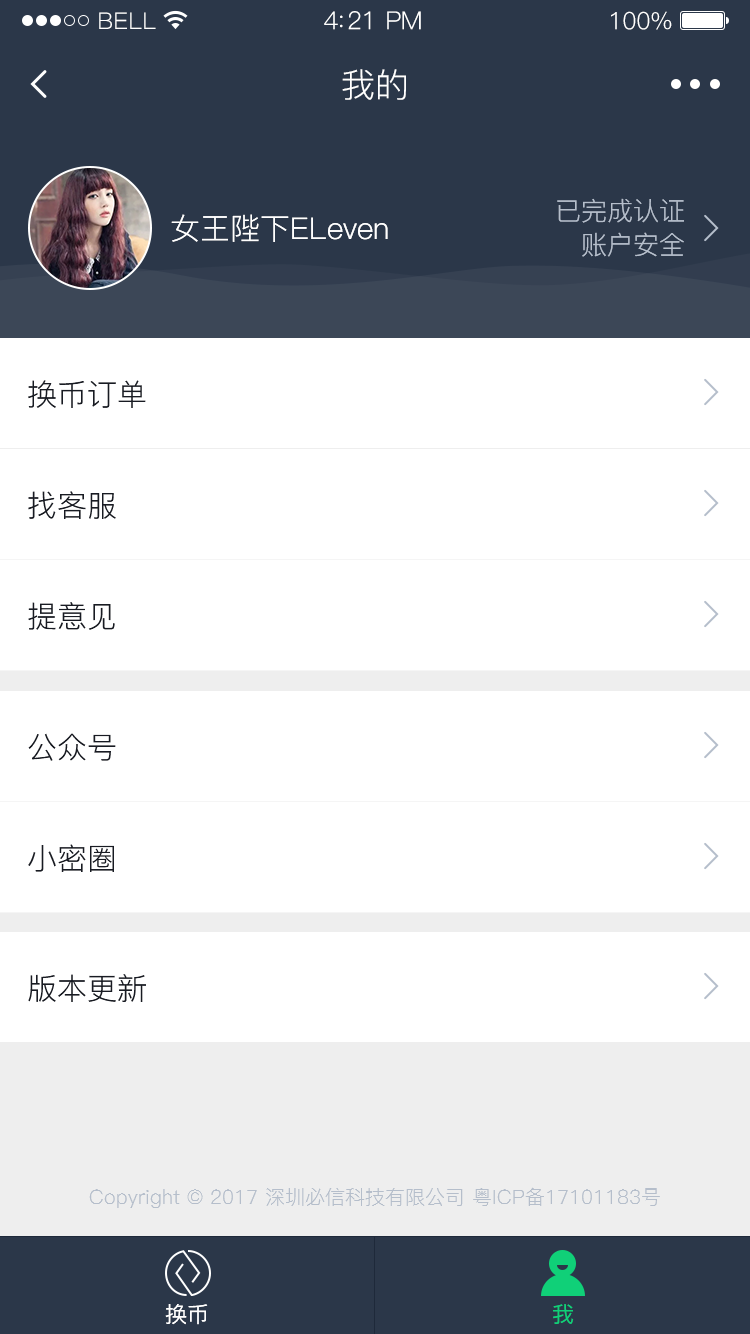
<style>
.page{position:relative;width:750px;height:1334px;background:#ffffff}
.page>*{position:absolute;margin:0}
.t1{font:23px "PingFang-SC-Regular";letter-spacing:0.02em;color:#ffffff}
.t2{font:25px "PingFang-SC-Regular";letter-spacing:-0.02em;color:#ffffff}
.t3{font:24px "PingFang-SC-Regular";letter-spacing:-0.02em;color:#ffffff}
.t4{font:34px "PingFang-SC-Regular";color:#ffffff}
.t5{font:26px/34px "PingFang-SC-Regular";color:#b5becb}
.t6{font:30px "PingFang-SC-Regular";color:#ffffff}
.t7{font:30px "PingFang-SC-Regular";color:#181b23}
.t8{font:20px "PingFang-SC-Regular";color:#b5becb}
.t9{font:22px "PingFang-SC-Medium";color:#ffffff}
.t10{font:22px "PingFang-SC-Medium";color:#10d078}
</style>
<div class="page">
<p class="t1" style="left:99px;top:12px;width:57px;height:17px">BELL</p>
<p class="t2" style="left:324px;top:11px;width:97px;height:19px">4:21 PM</p>
<p class="t3" style="left:611px;top:11px;width:61px;height:19px">100%</p>
<p class="t4" style="left:342px;top:69px;width:64px;height:31px">我的</p>
<p class="t5" style="left:557px;top:198px;width:127px;height:59px;text-align:right">已完成认证<br>账户安全</p>
<p class="t6" style="left:171px;top:214px;width:217px;height:28px">女王陛下ELeven</p>
<p class="t7" style="left:28px;top:380px;width:118px;height:28px">换币订单</p>
<p class="t7" style="left:28px;top:491px;width:88px;height:28px">找客服</p>
<p class="t7" style="left:28px;top:602px;width:87px;height:28px">提意见</p>
<p class="t7" style="left:28px;top:733px;width:88px;height:28px">公众号</p>
<p class="t7" style="left:28px;top:844px;width:86px;height:28px">小密圈</p>
<p class="t7" style="left:28px;top:974px;width:118px;height:28px">版本更新</p>
<p class="t8" style="left:89px;top:1187px;width:571px;height:21px">Copyright © 2017 深圳必信科技有限公司 粤ICP备17101183号</p>
<p class="t9" style="left:165px;top:1304px;width:43px;height:21px">换币</p>
<p class="t10" style="left:553px;top:1304px;width:21px;height:20px">我</p>
</div>
